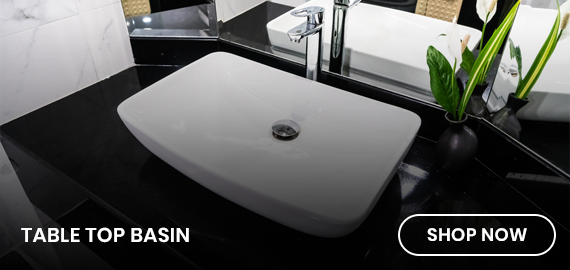
<style>
.page{position:relative;width:570px;height:270px}
.page>*{position:absolute;margin:0}
.t1{font:20px "Poppins-SemiBold";letter-spacing:0.02em;color:#ffffff;text-transform:uppercase}
.t2{font:18px "Poppins-SemiBold";letter-spacing:0.02em;color:#ffffff;text-transform:uppercase}
</style>
<div class="page">
<p class="t1" style="left:21px;top:227px;width:168px;height:16px">Table Top Basin</p>
<p class="t2" style="left:427px;top:228px;width:100px;height:13px">SHOP NOW</p>
</div>
